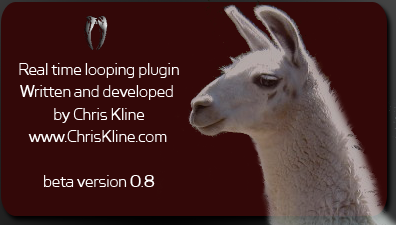
<style>
.page{position:relative;width:396px;height:225px;background:#330808}
.page>*{position:absolute;margin:0}
.t1{font:18.7px "SimianText-Orangutan";letter-spacing:-0.025em;color:#ffffff}
</style>
<div class="page">
<p class="t1" style="left:19px;top:63px;width:160px;height:124px;text-align:center">Real time looping plugin<br>Written and developed <br>by Chris Kline<br>www.ChrisKline.com<br><br>beta version 0.8</p>
</div>
